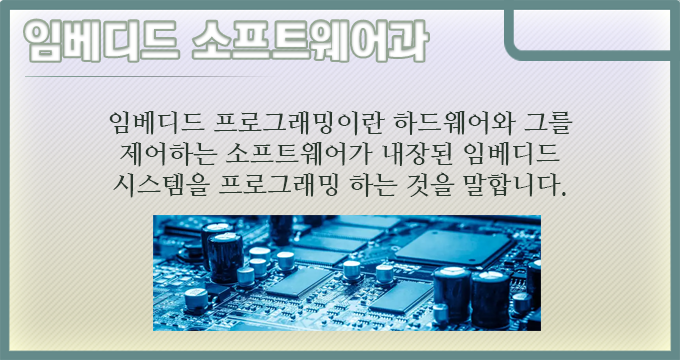
<style>
.page{position:relative;width:680px;height:360px}
.page>*{position:absolute;margin:0}
.t1{font:44px "KoreanTITGD5-R";letter-spacing:-0.01em;color:#ffffff}
.t2{font:26px "NanumMyeongjoBold";letter-spacing:-0.01em;color:#2a382e}
</style>
<div class="page">
<p class="t1" style="left:25px;top:20px;width:403px;height:41px">임베디드 소프트웨어과</p>
<p class="t2" style="left:109px;top:111px;width:464px;height:87px;text-align:center">임베디드 프로그래밍이란 하드웨어와 그를 제어하는 소프트웨어가 내장된 임베디드 시스템을 프로그래밍 하는 것을 말합니다.</p>
</div>
